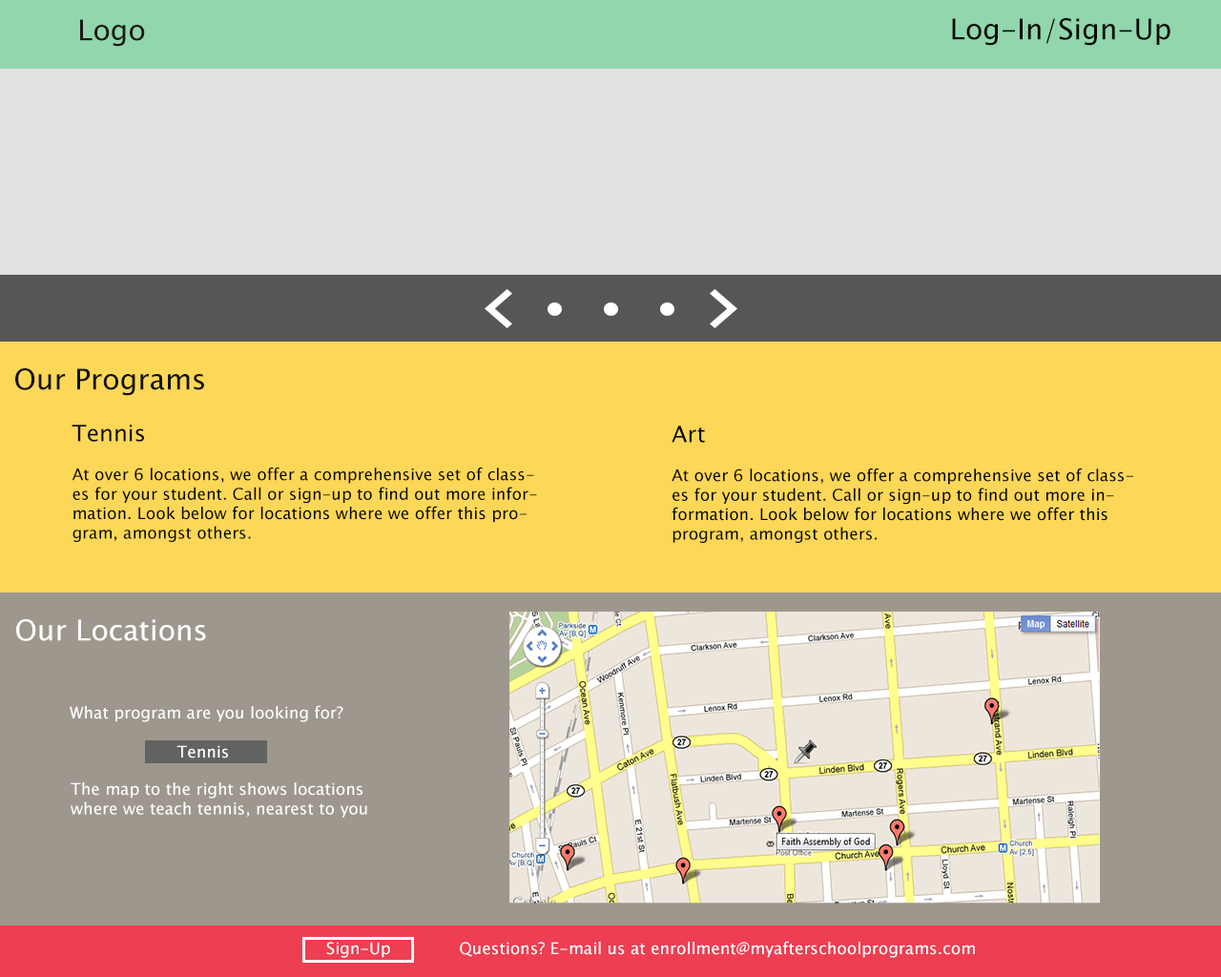
<style>
.page{position:relative;width:1221px;height:977px;background:#fdd757}
.page>*{position:absolute;margin:0}
.t1{font:28.6px "LucidaSansUnicode";color:#1d1919}
.t2{font:28.6px "LucidaSansUnicode";color:#060505}
.t3{font:28.6px "LucidaSansUnicode";color:#111111}
.t4{font:16.2px "LucidaSansUnicode";color:#060505}
.t5{font:22.9px "LucidaSansUnicode";color:#060505}
.t6{font:28.6px "LucidaSansUnicode";color:#ffffff}
.t7{font:16.2px "LucidaSansUnicode";color:#ffffff}
.t8{font:16.2px "LucidaSansUnicode";color:#fefefe}
</style>
<div class="page">
<p class="t1" style="left:80px;top:19px;width:65px;height:28px">Logo</p>
<p class="t2" style="left:952px;top:18px;width:218px;height:28px">Log-In/Sign-Up</p>
<p class="t3" style="left:15px;top:368px;width:189px;height:28px">Our Programs</p>
<p class="t4" style="left:72px;top:424px;width:465px;height:118px"><span class="t5">Tennis<br></span><br>At over 6 locations, we offer a comprehensive set of classes for your student. Call or sign-up to find out more information. Look below for locations where we offer this program, amongst others.</p>
<p class="t4" style="left:671px;top:425px;width:462px;height:118px"><span class="t5">Art<br></span><br>At over 6 locations, we offer a comprehensive set of classes for your student. Call or sign-up to find out more information. Look below for locations where we offer this program, amongst others.</p>
<p class="t6" style="left:16px;top:619px;width:190px;height:22px">Our Locations</p>
<p class="t7" style="left:70px;top:705px;width:273px;height:17px">What program are you looking for?</p>
<p class="t7" style="left:176px;top:745px;width:52px;height:13px">Tennis</p>
<p class="t7" style="left:71px;top:782px;width:296px;height:35px">The map to the right shows locations where we teach tennis, nearest to you</p>
<p class="t8" style="left:326px;top:941px;width:64px;height:17px">Sign-Up</p>
<p class="t8" style="left:460px;top:940px;width:515px;height:18px">Questions? E-mail us at enrollment@myafterschoolprograms.com</p>
</div>
